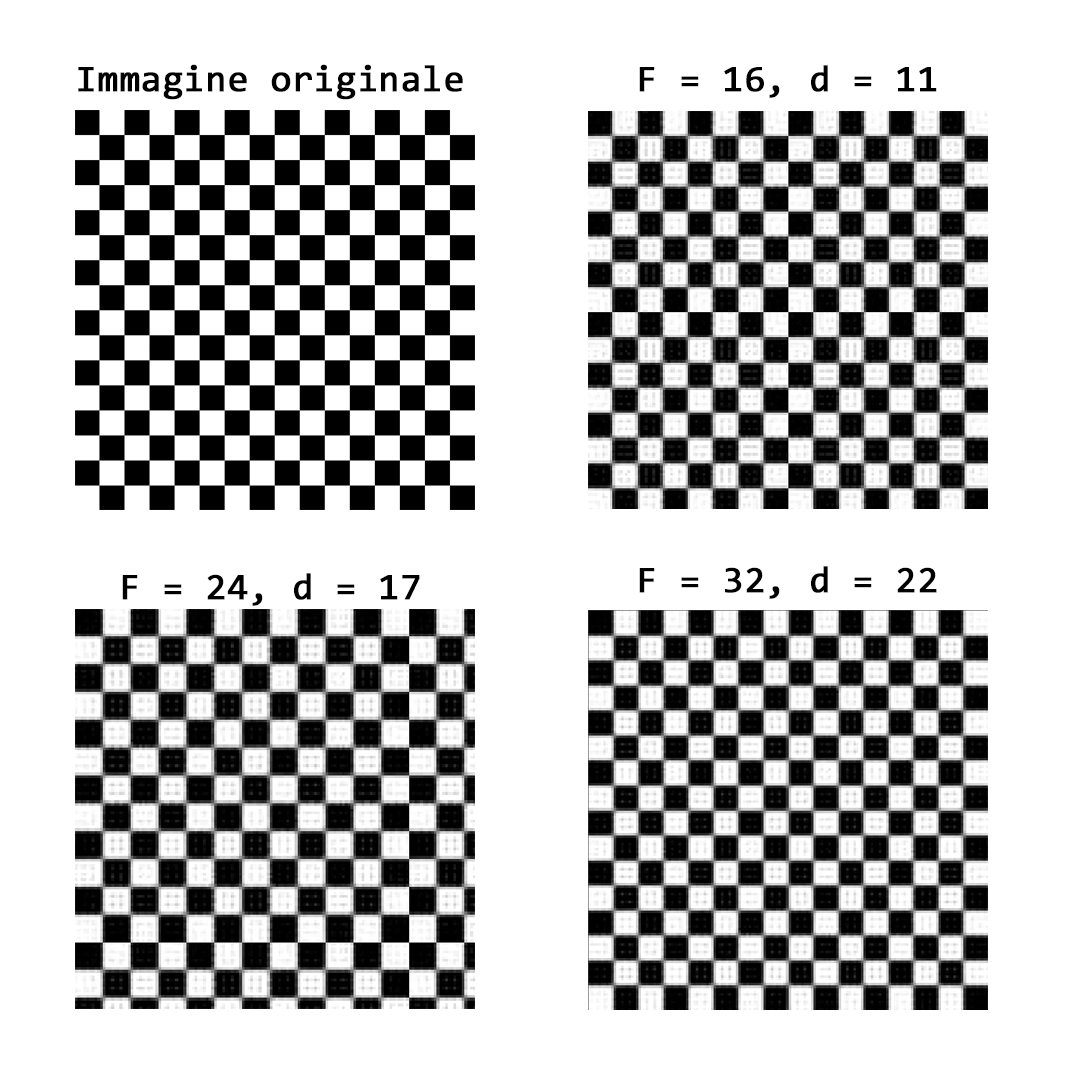
<style>
.page{position:relative;width:1080px;height:1080px;background:#ffffff}
.page>*{position:absolute;margin:0}
.t1{font:37.5px "Consolas";color:#000000;font-weight:bold}
</style>
<div class="page">
<p class="t1" style="left:78px;top:64px;width:385px;height:36px">Immagine originale</p>
<p class="t1" style="left:639px;top:65px;width:298px;height:33px">F = 16, d = 11</p>
<p class="t1" style="left:639px;top:566px;width:298px;height:33px">F = 32, d = 22</p>
<p class="t1" style="left:122px;top:573px;width:298px;height:33px">F = 24, d = 17</p>
</div>
